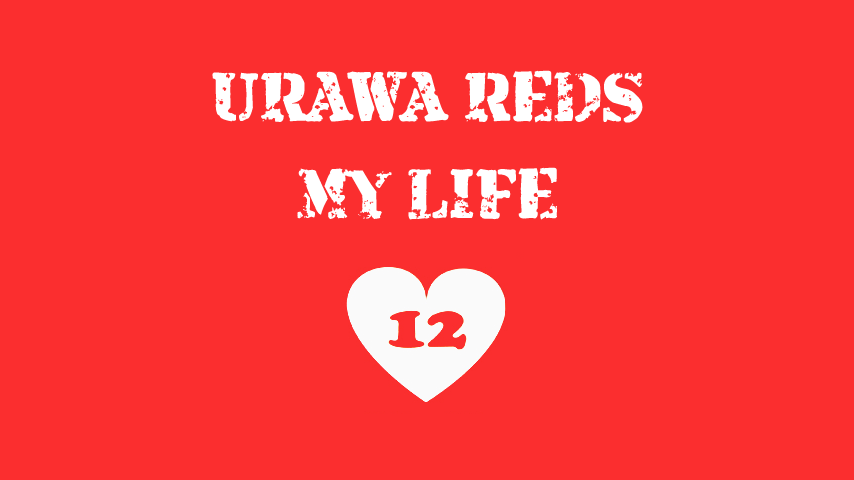
<style>
.page{position:relative;width:854px;height:480px;background:#fb2e2f}
.page>*{position:absolute;margin:0}
.t1{font:72px "ArmaliteRifle";color:#ffffff}
</style>
<div class="page">
<p class="t1" style="left:212px;top:70px;width:431px;height:53px">URAWA REDS</p>
<p class="t1" style="left:297px;top:167px;width:260px;height:53px">MY LIFE</p>
</div>
